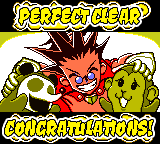
<style>
.page{position:relative;width:160px;height:144px;background:#ffffff}
.page>*{position:absolute;margin:0}
.t1{font:28.5px "CevicheOne-Regular";color:#fff700;scale:0.7 1}
</style>
<div class="page">
<p class="t1" style="left:19px;top:8px;width:121px;height:17px">PERFECT CLEAR</p>
<p class="t1" style="left:5px;top:119px;width:148px;height:18px">CONGRATULATIONS!</p>
</div>
